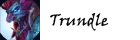
<style>
.page{position:relative;width:140px;height:40px;background:#ffffff}
.page>*{position:absolute;margin:0}
.t1{font:16px "VinerHandITC";color:#000000}
</style>
<div class="page">
<p class="t1" style="left:50px;top:13px;width:59px;height:18px">Trundle</p>
</div>
